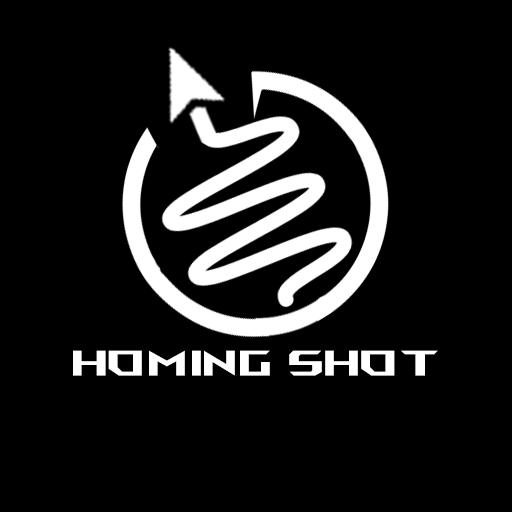
<style>
.page{position:relative;width:512px;height:512px;background:#000000}
.page>*{position:absolute;margin:0}
.t1{font:35.4px "AniMeMatrix-MB_EN";color:#ffffff;scale:1.18 1}
</style>
<div class="page">
<p class="t1" style="left:73px;top:350px;width:365px;height:26px">HOMING SHOT</p>
</div>
